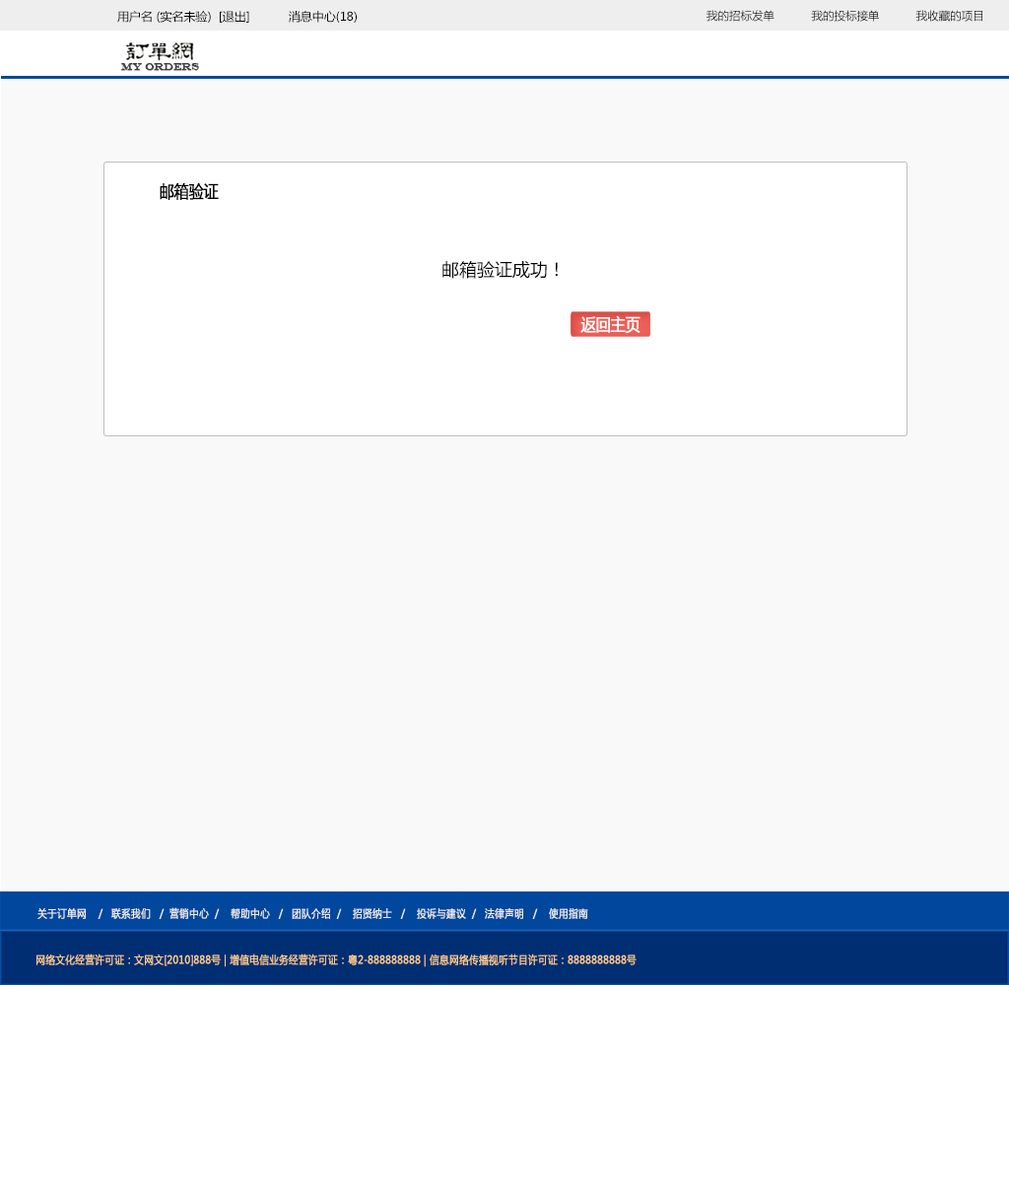
<style>
.page{position:relative;width:1009px;height:1182px;background:#f9f9f9}
.page>*{position:absolute;margin:0}
.t1{font:11.8px "MicrosoftYaHei";color:#000000}
.t2{font:11.3px "MicrosoftYaHei";color:#000000}
.t3{font:10.8px "EngraversMT";color:#434343;font-variant:small-caps;font-weight:bold;scale:0.86 1}
.t4{font:17.2px "MicrosoftYaHei";color:#000000;font-variant:small-caps;font-weight:bold;scale:0.86 1}
.t5{font:17.7px "MicrosoftYaHei";color:#000000}
.t6{font:17.2px "MicrosoftYaHei";color:#ffffff;font-variant:small-caps;font-weight:bold;scale:0.86 1}
.t7{font:10.8px "MicrosoftYaHei";color:#eeeeee;font-variant:small-caps;font-weight:bold;scale:0.86 1}
.t8{font:15.2px "STXihei";color:#eeeeee;font-variant:small-caps;font-weight:bold;scale:0.86 1}
.t9{font:10.8px "MicrosoftYaHei";color:#facd89;font-variant:small-caps;font-weight:bold;scale:0.87 1}
.t10{font:10.8px "MicrosoftYaHei";color:#eeeeee;font-variant:small-caps;font-weight:bold;scale:0.87 1}
</style>
<div class="page">
<p class="t1" style="left:117px;top:11px;width:240px;height:12px">用户名 (实名未验)  [退出]           消息中心(18)</p>
<p class="t2" style="left:706px;top:10px;width:276px;height:12px">我的招标发单           我的投标接单           我收藏的项目</p>
<p class="t3" style="left:121px;top:63px;width:78px;height:8px">MY ORDERS</p>
<p class="t4" style="left:160px;top:183px;width:59px;height:17px">邮箱验证</p>
<p class="t5" style="left:442px;top:261px;width:116px;height:18px">邮箱验证成功！</p>
<p class="t6" style="left:580px;top:315px;width:60px;height:19px">返回主页</p>
<p class="t7" style="left:37px;top:907px;width:551px;height:12px"><span class="t8"><br><br></span>关于订单网    /   联系我们   /  营销中心  /    帮助中心   /   团队介绍  /    招贤纳士   /    投诉与建议  /   法律声明   /    使用指南</p>
<p class="t9" style="left:36px;top:954px;width:600px;height:13px"><span class="t10"> </span>网络文化经营许可证：文网文[2010]888号 | 增值电信业务经营许可证：粤2-888888888 | 信息网络传播视听节目许可证：8888888888号</p>
</div>
